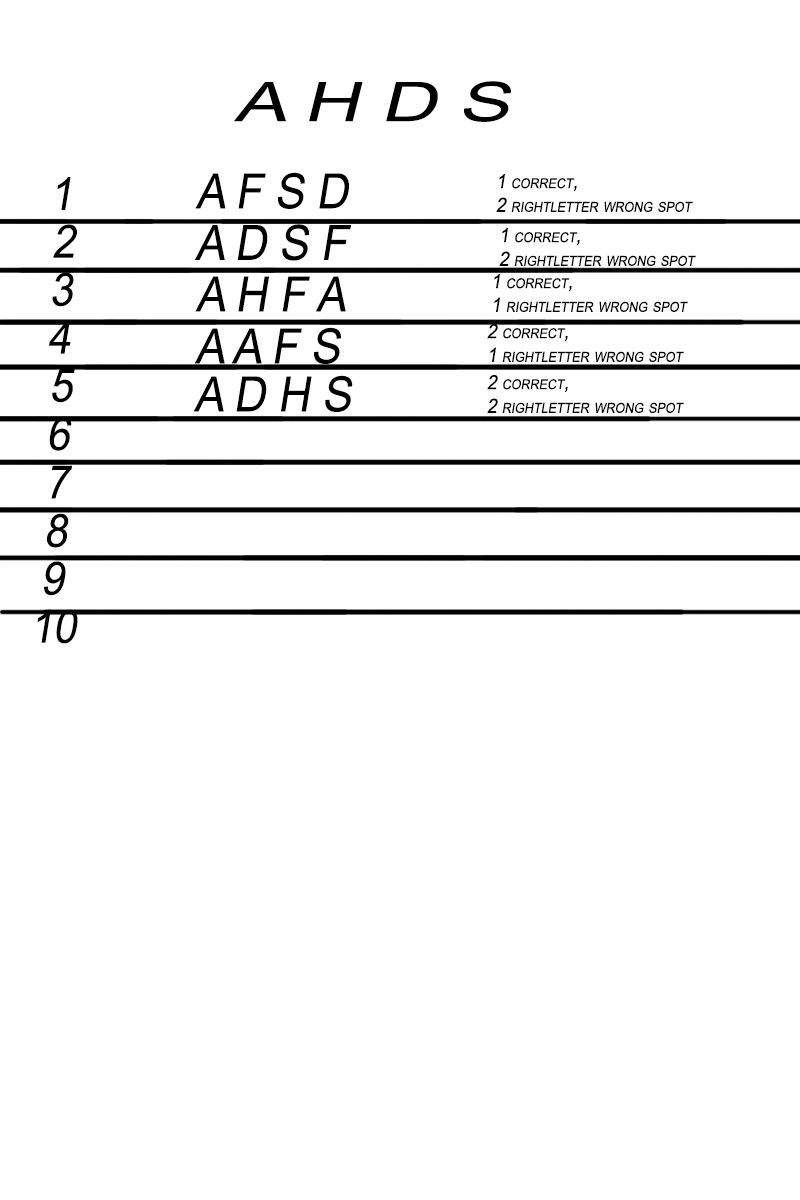
<style>
.page{position:relative;width:800px;height:1200px;background:#ffffff}
.page>*{position:absolute;margin:0}
.t1{font:54.6px "ArialMT";color:#000000;font-variant:small-caps;font-style:italic;scale:1.42 1}
.t2{font:48.6px "ArialMT";color:#000000;font-variant:small-caps;font-style:italic;scale:0.91 1}
.t3{font:19.7px "ArialMT";color:#000000;font-variant:small-caps;font-style:italic;scale:0.91 1}
.t4{font:45.8px "ArialMT";color:#000000;font-variant:small-caps;font-style:italic;scale:0.91 1}
</style>
<div class="page">
<p class="t1" style="left:234px;top:81px;width:277px;height:41px">A H D S</p>
<p class="t2" style="left:195px;top:172px;width:154px;height:37px">A F S D</p>
<p class="t3" style="left:496px;top:174px;width:197px;height:38px">1 correct, <br>2 rightletter wrong spot</p>
<p class="t4" style="left:57px;top:177px;width:14px;height:33px">1</p>
<p class="t4" style="left:53px;top:224px;width:24px;height:34px">2</p>
<p class="t2" style="left:195px;top:224px;width:156px;height:37px">A D S F</p>
<p class="t3" style="left:499px;top:228px;width:197px;height:38px">1 correct, <br>2 rightletter wrong spot</p>
<p class="t4" style="left:52px;top:272px;width:22px;height:35px">3</p>
<p class="t2" style="left:195px;top:276px;width:151px;height:36px">A H F A</p>
<p class="t3" style="left:494px;top:274px;width:194px;height:38px">1 correct, <br>1 rightletter wrong spot</p>
<p class="t4" style="left:49px;top:320px;width:22px;height:34px">4</p>
<p class="t2" style="left:194px;top:327px;width:147px;height:37px">A A F S</p>
<p class="t3" style="left:487px;top:324px;width:197px;height:38px">2 correct, <br>1 rightletter wrong spot</p>
<p class="t4" style="left:52px;top:369px;width:23px;height:34px">5</p>
<p class="t2" style="left:193px;top:375px;width:160px;height:37px">A D H S</p>
<p class="t3" style="left:487px;top:375px;width:197px;height:38px">2 correct, <br>2 rightletter wrong spot</p>
<p class="t4" style="left:49px;top:417px;width:23px;height:34px">6</p>
<p class="t4" style="left:51px;top:465px;width:21px;height:34px">7</p>
<p class="t4" style="left:47px;top:513px;width:22px;height:35px">8</p>
<p class="t4" style="left:44px;top:561px;width:22px;height:35px">9</p>
<p class="t4" style="left:37px;top:609px;width:41px;height:35px">10</p>
</div>
